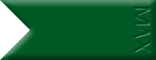
<style>
.page{position:relative;width:156px;height:60px;background:#005924}
.page>*{position:absolute;margin:0}
.t1{font:23.7px "SFTheraminGothic"}
</style>
<div class="page">
<p class="t1" style="left:134px;top:6px;width:17px;height:47px;rotate:90deg">MAX</p>
</div>
